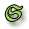
<style>
.page{position:relative;width:29px;height:29px;background:#ffffff}
.page>*{position:absolute;margin:0}
.t1{font:24px "OldGermen";letter-spacing:0.05em;color:#9fda58}
</style>
<div class="page">
<p class="t1" style="left:5px;top:5px;width:18px;height:16px">S</p>
</div>
